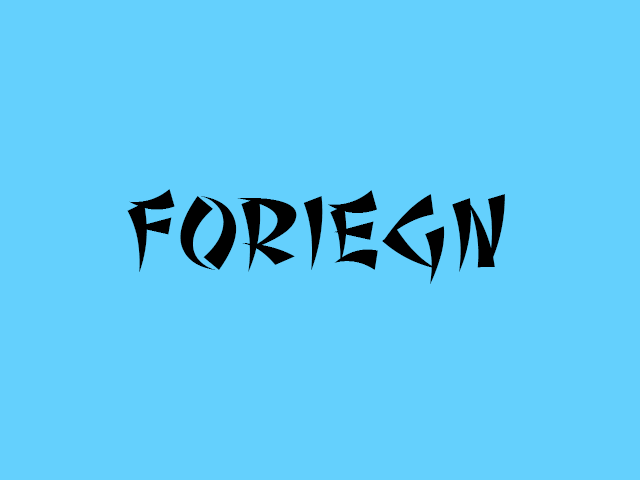
<style>
.page{position:relative;width:640px;height:480px;background:#64d0fd}
.page>*{position:absolute;margin:0}
.t1{font:100px "SevenMonkeyFuryBB";color:#000000}
</style>
<div class="page">
<p class="t1" style="left:127px;top:189px;width:378px;height:95px">Foriegn</p>
</div>
